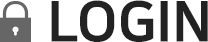
<style>
.page{position:relative;width:208px;height:42px;background:#ffffff}
.page>*{position:absolute;margin:0}
.t1{font:56px "NanumSquareEB";color:#222222}
</style>
<div class="page">
<p class="t1" style="left:51px;top:0px;width:157px;height:42px">LOGIN</p>
</div>
